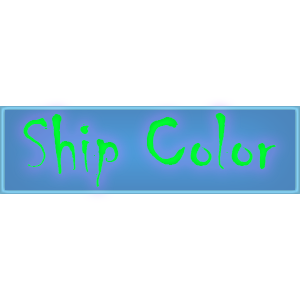
<style>
.page{position:relative;width:300px;height:300px;background:#ffffff}
.page>*{position:absolute;margin:0}
.t1{font:83.3px "Chiller-Regular";color:#00fb2f}
</style>
<div class="page">
<p class="t1" style="left:23px;top:113px;width:253px;height:74px">Ship Color</p>
</div>
